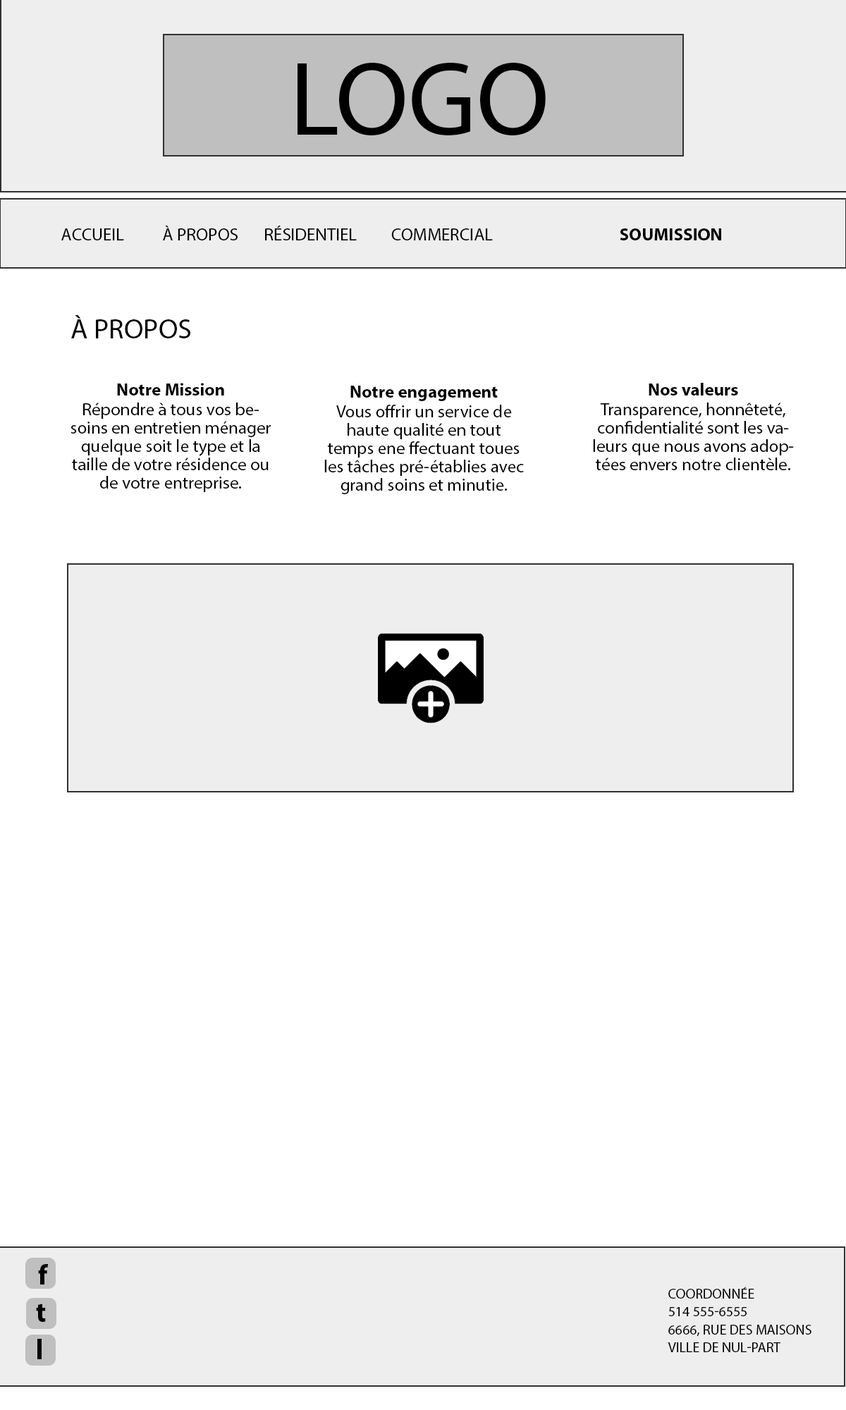
<style>
.page{position:relative;width:846px;height:1410px;background:#ffffff}
.page>*{position:absolute;margin:0}
.t1{font:105.7px "MyriadPro-Regular";color:#000000;text-transform:uppercase}
.t2{font:17.6px "MyriadPro-Regular";color:#000000;text-transform:uppercase}
.t3{font:17.6px "MyriadPro-Bold";color:#000000;text-transform:uppercase}
.t4{font:28.2px "MyriadPro-Regular";color:#000000;text-transform:uppercase}
.t5{font:17.6px/18.3px "MyriadPro-Regular";color:#000000}
.t6{font:17.6px/18.3px "MyriadPro-Bold";color:#000000}
.t7{font:28.2px "MyriadPro-Bold";color:#000000}
.t8{font:14.1px "MyriadPro-Regular";color:#000000;text-transform:uppercase}
</style>
<div class="page">
<p class="t1" style="left:297px;top:62px;width:249px;height:74px">logo</p>
<p class="t2" style="left:61px;top:226px;width:660px;height:14px">accueil  à propos  résidentiel  commercial     <span class="t3">soumission</span></p>
<p class="t4" style="left:71px;top:315px;width:119px;height:23px">à propos</p>
<p class="t5" style="left:70px;top:383px;width:201px;height:109px;text-align:center"><span class="t6">Notre Mission</span><br>Répondre à tous vos besoins en entretien ménager quelque soit le type et la taille de votre résidence ou de votre entreprise.</p>
<p class="t5" style="left:324px;top:386px;width:200px;height:108px;text-align:center"><span class="t6">Notre engagement<br></span>Vous offrir un service de haute qualité en tout temps ene ffectuant toues les tâches pré-établies avec grand soins et minutie.</p>
<p class="t5" style="left:593px;top:383px;width:201px;height:87px;text-align:center"><span class="t6">Nos valeurs<br></span>Transparence, honnêteté, confidentialité sont les valeurs que nous avons adoptées envers notre clientèle.</p>
<p class="t7" style="left:38px;top:1264px;width:10px;height:20px">f</p>
<p class="t8" style="left:668px;top:1286px;width:143px;height:66px">coordonnée<br>514 555-6555<br>6666, rUE DES MAISONS<br>VILLE DE NUL-PART</p>
<p class="t7" style="left:36px;top:1303px;width:10px;height:19px">t</p>
</div>
